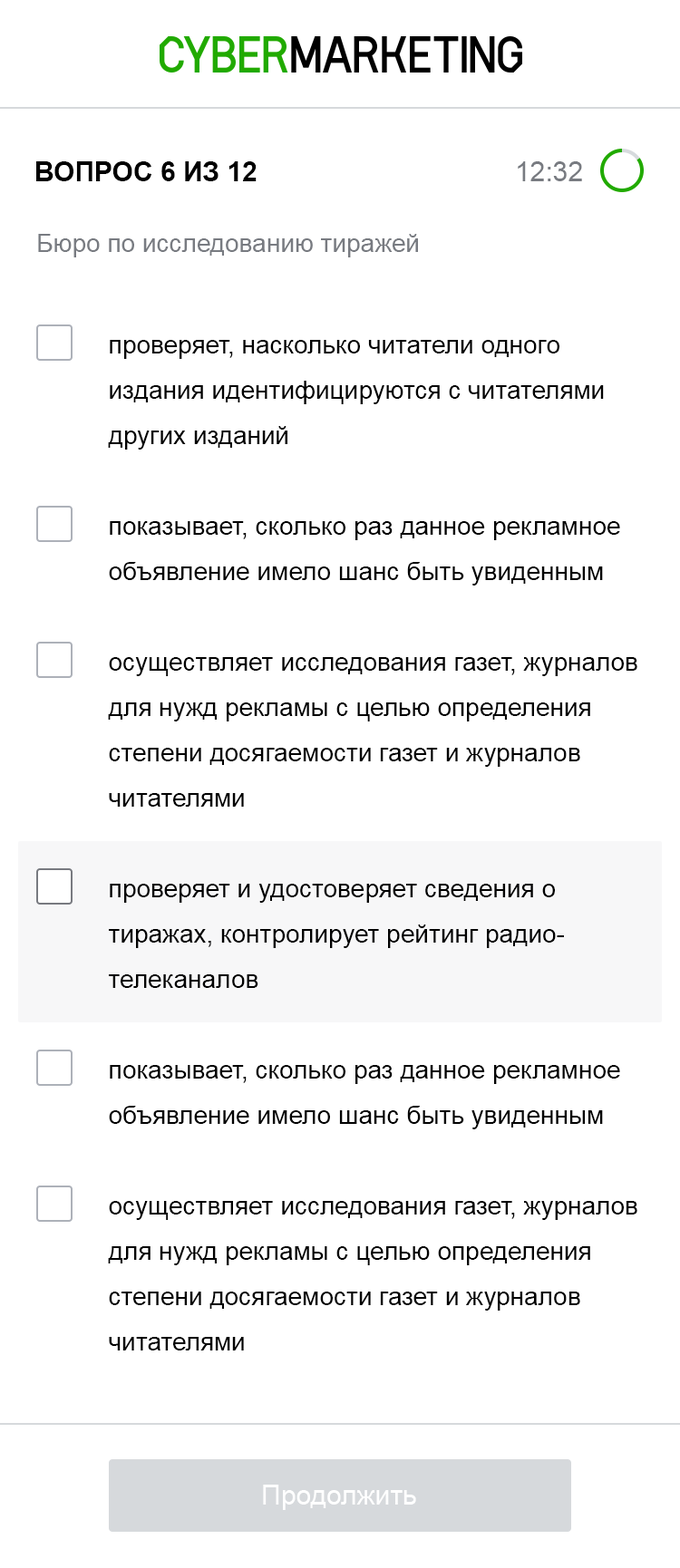
<style>
.page{position:relative;width:680px;height:1568px;background:#ffffff}
.page>*{position:absolute;margin:0}
.t1{font:27.2px "Arial-BoldMT";color:#000000;text-transform:uppercase}
.t2{font:27.2px "ArialMT";color:#787b81}
.t3{font:25.4px "ArialMT";color:#787b81}
.t4{font:25.4px/45.3px "ArialMT";color:#000000}
.t5{font:25.4px/90.6px "ArialMT";color:#000000}
.t6{font:27.2px "ArialMT";color:#ffffff}
</style>
<div class="page">
<p class="t1" style="left:36px;top:161px;width:220px;height:20px">Вопрос 6 из 12</p>
<p class="t2" style="left:518px;top:161px;width:64px;height:20px">12:32</p>
<p class="t3" style="left:38px;top:234px;width:380px;height:23px">Бюро по исследованию тиражей</p>
<p class="t4" style="left:108px;top:340px;width:529px;height:1010px">проверяет, насколько читатели одного <br>издания идентифицируются с читателями <br>других изданий<br><span class="t5">пока</span>зывает, сколько раз данное рекламное <br>объявление имело шанс быть увиденным<br><span class="t5">о</span>существляет исследования газет, журналов <br>для нужд рекламы с целью определения <br>степени досягаемости газет и журналов <br>читателями<br><span class="t5">проверяет и у</span>достоверяет сведения о <br>тиражах, контролирует рейтинг радио-<br>телеканалов<br><span class="t5">пока</span>зывает, сколько раз данное рекламное <br>объявление имело шанс быть увиденным<br><span class="t5">о</span>существляет исследования газет, журналов <br>для нужд рекламы с целью определения <br>степени досягаемости газет и журналов <br>читателями</p>
<p class="t6" style="left:263px;top:1485px;width:153px;height:25px">Продолжить</p>
</div>
